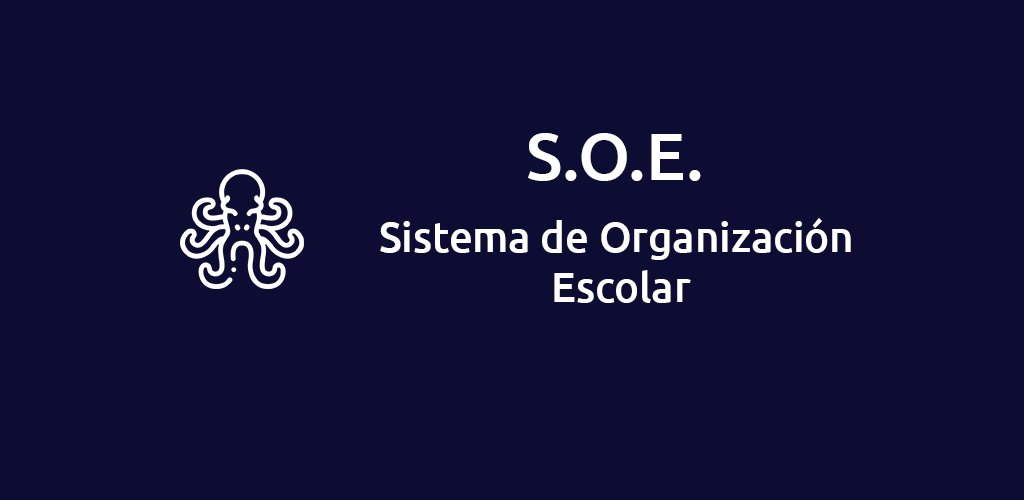
<style>
.page{position:relative;width:1024px;height:500px;background:#0d0d33}
.page>*{position:absolute;margin:0}
.t1{font:66.7px "Ubuntu-Medium";color:#ffffff}
.t2{font:41.7px "Ubuntu-Medium";color:#ffffff}
</style>
<div class="page">
<p class="t1" style="left:528px;top:133px;width:173px;height:48px">S.O.E.</p>
<p class="t2" style="left:380px;top:218px;width:471px;height:85px;text-align:center">Sistema de Organización<br> Escolar</p>
</div>
